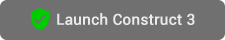
<style>
.page{position:relative;width:225px;height:40px;background:#707070}
.page>*{position:absolute;margin:0}
.t1{font:15px "Roboto-Regular";color:#eaeaea;font-weight:bold}
</style>
<div class="page">
<p class="t1" style="left:57px;top:13px;width:138px;height:12px">Launch Construct 3</p>
</div>
